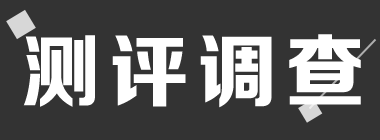
<style>
.page{position:relative;width:380px;height:140px;background:#333333}
.page>*{position:absolute;margin:0}
.t1{font:80px "FZZDHJW--GB1-0";letter-spacing:0.1em;color:#ffffff}
</style>
<div class="page">
<p class="t1" style="left:23px;top:34px;width:338px;height:74px">测评调查</p>
</div>
